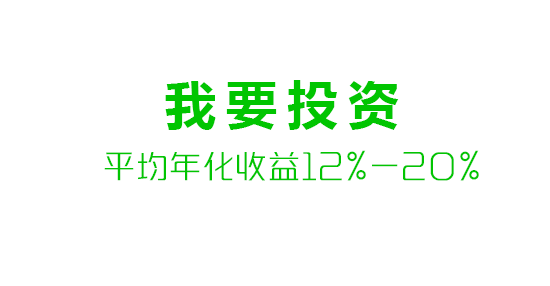
<style>
.page{position:relative;width:550px;height:286px;background:#ffffff}
.page>*{position:absolute;margin:0}
.t1{font:50.6px "MicrosoftYaHeiUI-Bold";letter-spacing:0.2em;color:#01c501}
.t2{font:30px "MFLangQian_Noncommercial-Light";letter-spacing:0.1em;color:#01c501}
</style>
<div class="page">
<p class="t1" style="left:165px;top:80px;width:234px;height:50px">我要投资</p>
<p class="t2" style="left:104px;top:150px;width:375px;height:31px">平均年化收益12%-20%</p>
</div>
